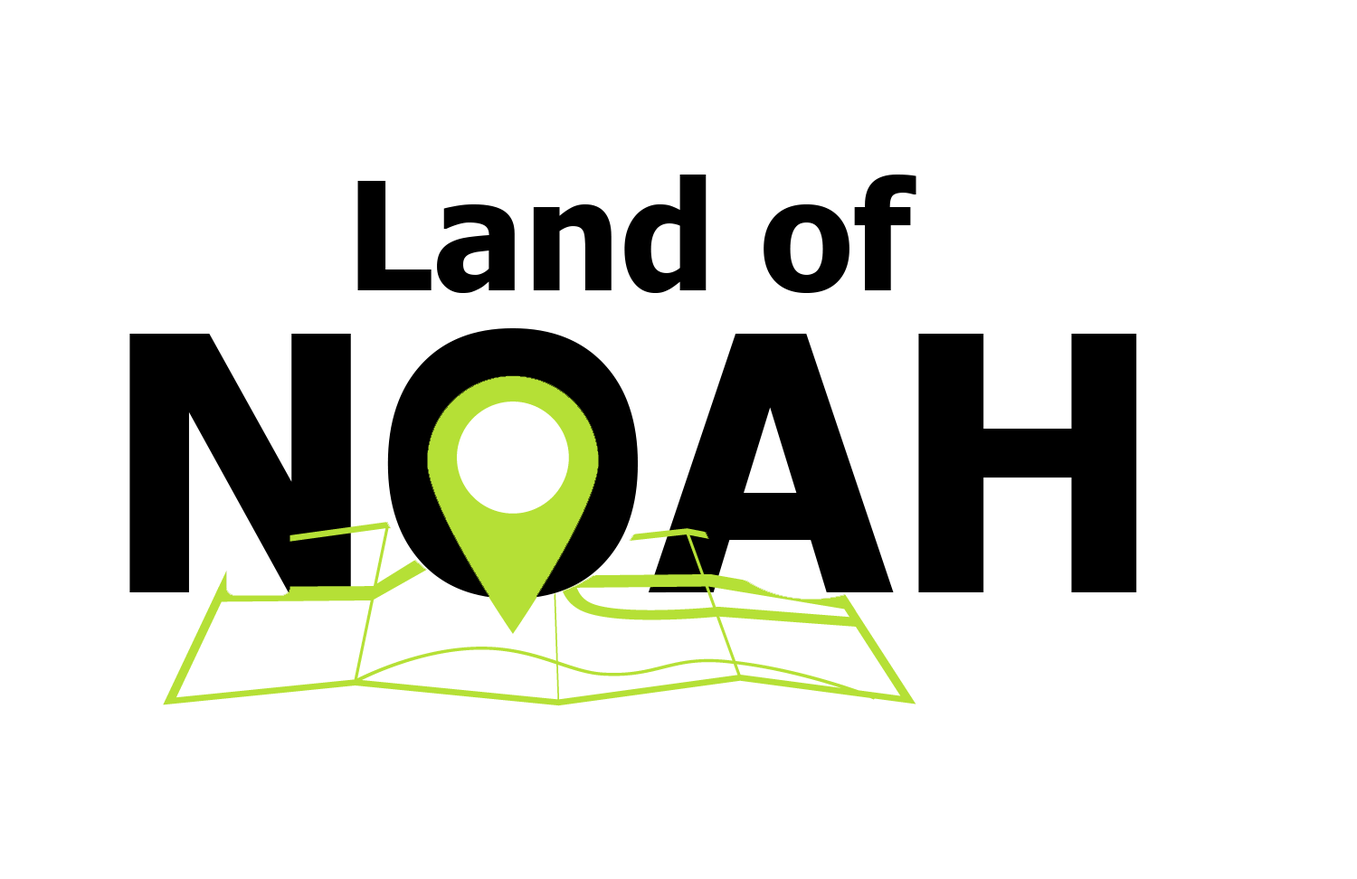
<style>
.page{position:relative;width:1357px;height:879px;background:#ffffff}
.page>*{position:absolute;margin:0}
.t1{font:150.8px "Tahoma-Bold";color:#000000}
.t2{font:355.3px "Tahoma-Bold";color:#000000}
</style>
<div class="page">
<p class="t1" style="left:357px;top:175px;width:559px;height:118px">Land of</p>
<p class="t2" style="left:129px;top:328px;width:1008px;height:271px">NOAH</p>
</div>
